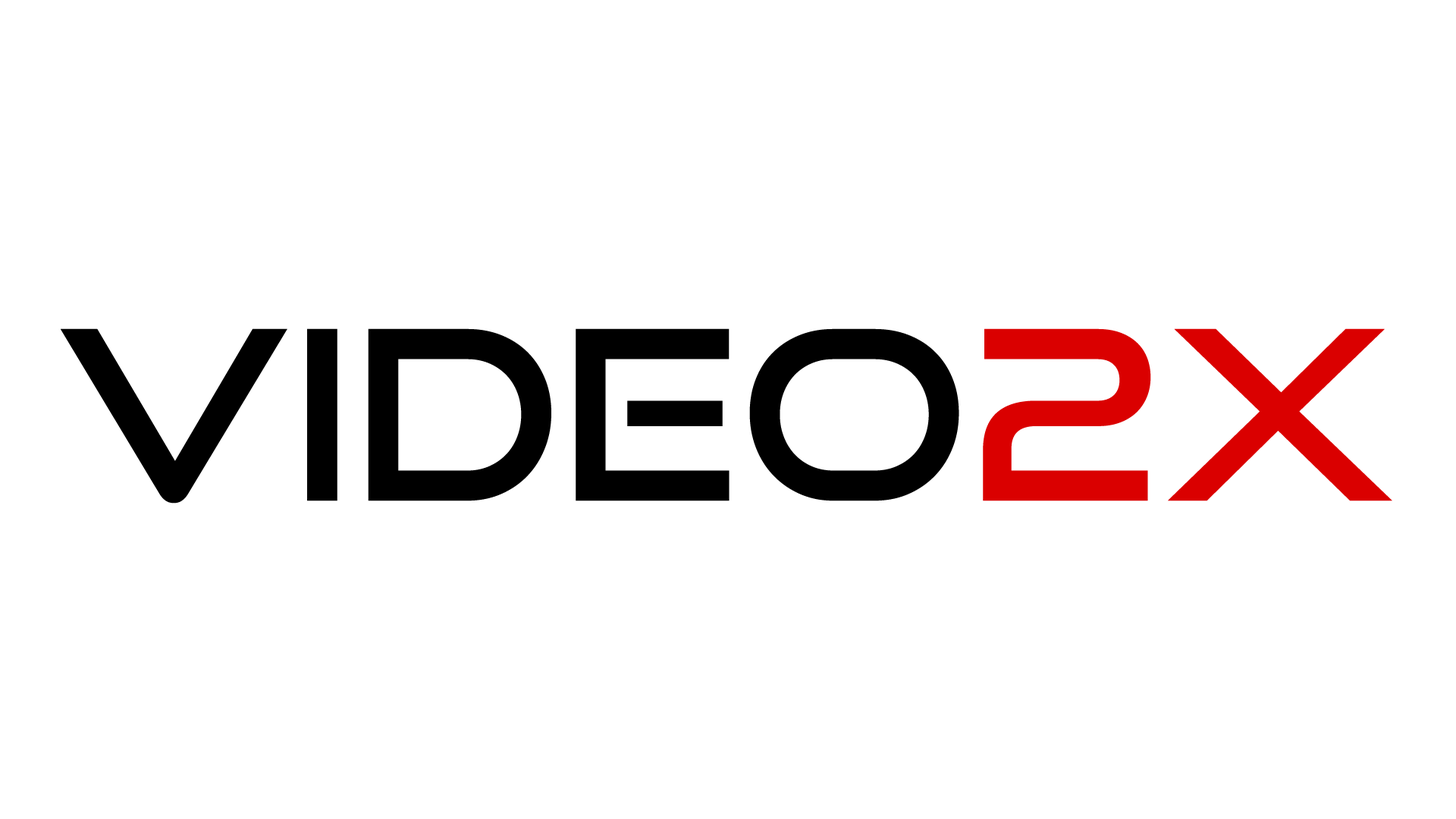
<style>
.page{position:relative;width:1456px;height:819px;background:#ffffff}
.page>*{position:absolute;margin:0}
.t1{font:235.8px "GoodTimesRg-Regular";color:#000000}
.t2{font:235.8px "GoodTimesRg-Regular";color:#da0000}
</style>
<div class="page">
<p class="t1" style="left:61px;top:328px;width:1331px;height:176px">Video<span class="t2">2X</span></p>
</div>
